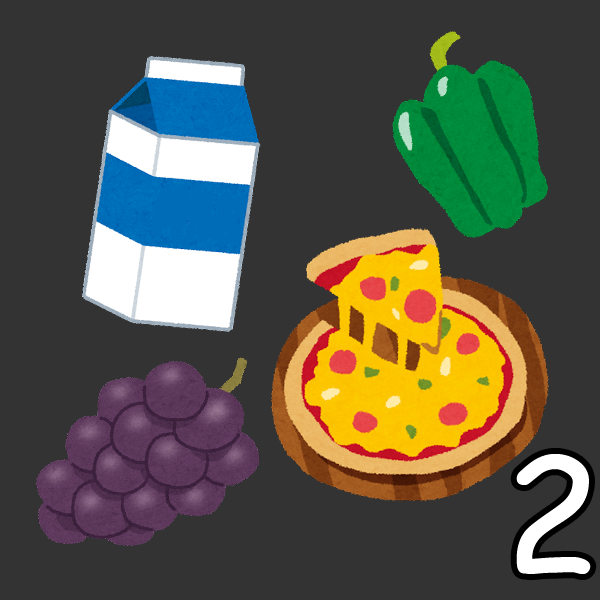
<style>
.page{position:relative;width:600px;height:600px;background:#333333}
.page>*{position:absolute;margin:0}
.t1{font:160px "ComicSansMS";color:#ffffff}
</style>
<div class="page">
<p class="t1" style="left:516px;top:454px;width:75px;height:120px">2</p>
</div>
